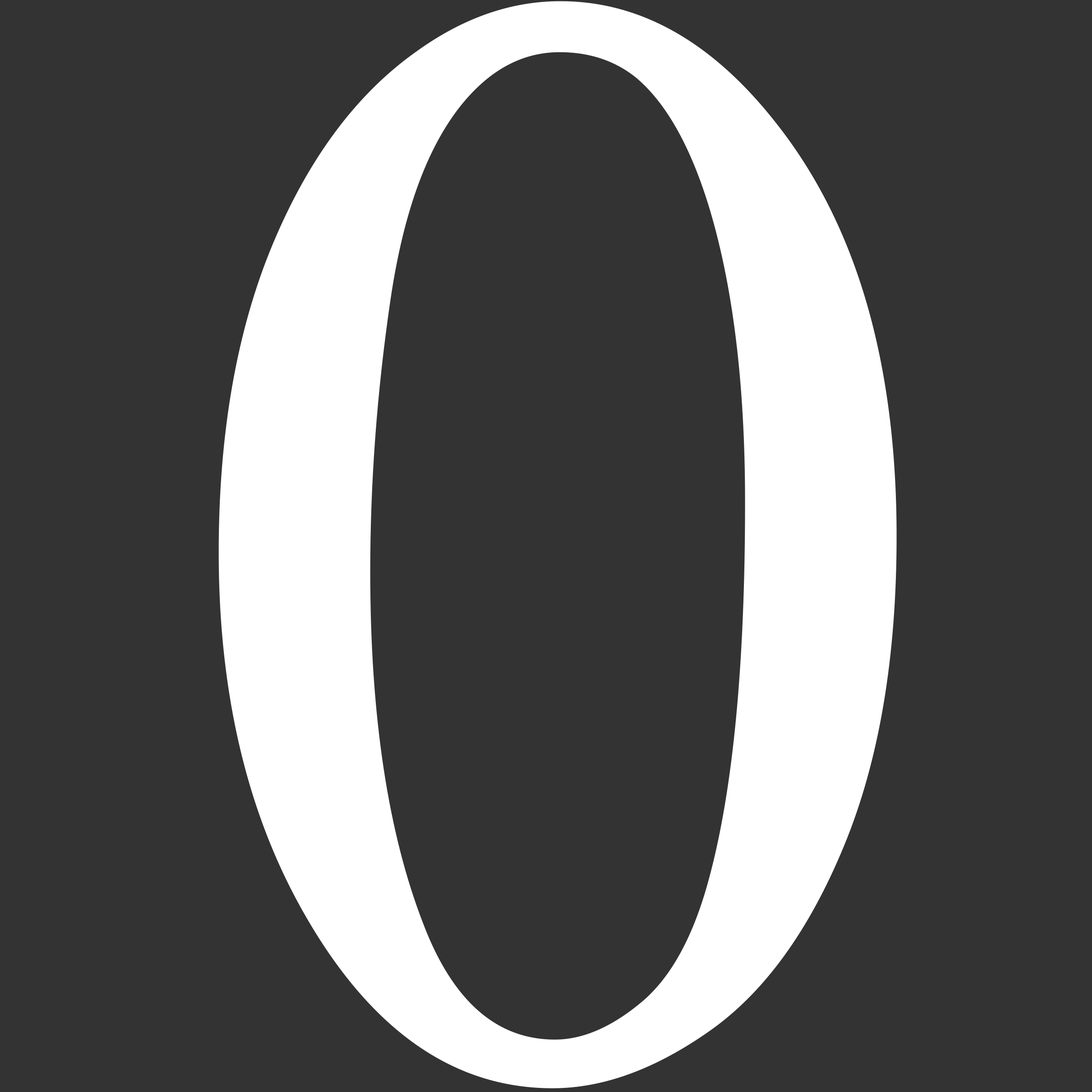
<style>
.page{position:relative;width:1092px;height:1092px;background:#333333}
.page>*{position:absolute;margin:0}
.t1{font:1580.9px "TimesNewRomanPSMT";color:#ffffff}
</style>
<div class="page">
<p class="t1" style="left:218px;top:1px;width:679px;height:1087px">0</p>
</div>
